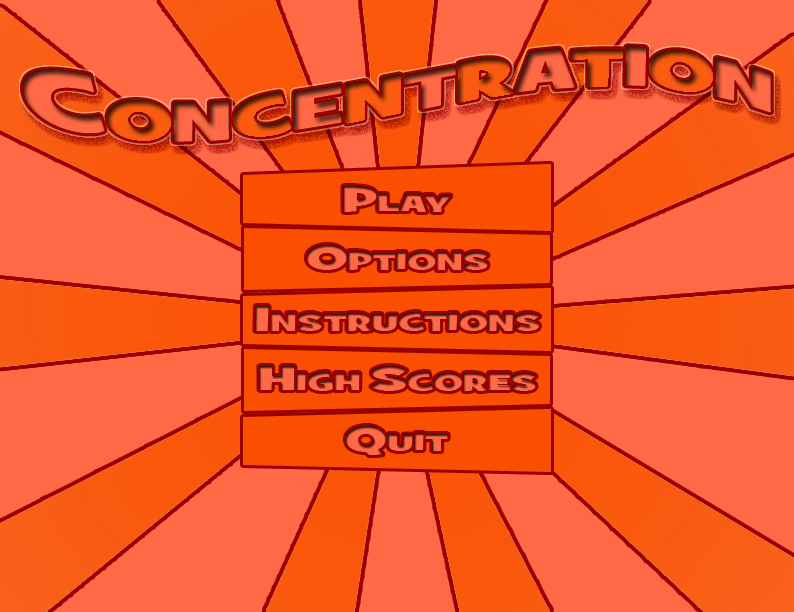
<style>
.page{position:relative;width:794px;height:612px;background:#ff6945}
.page>*{position:absolute;margin:0}
.t1{font:34.6px "GrilledCheeseBTNWideBlk";font-variant:small-caps;scale:1.06 1}
</style>
<div class="page">
<p class="t1" style="left:343px;top:186px;width:108px;height:26px">Play</p>
<p class="t1" style="left:306px;top:245px;width:182px;height:25px">Options</p>
<p class="t1" style="left:255px;top:306px;width:285px;height:25px">Instructions</p>
<p class="t1" style="left:259px;top:366px;width:277px;height:25px">High Scores</p>
<p class="t1" style="left:345px;top:426px;width:103px;height:29px">Quit</p>
</div>
